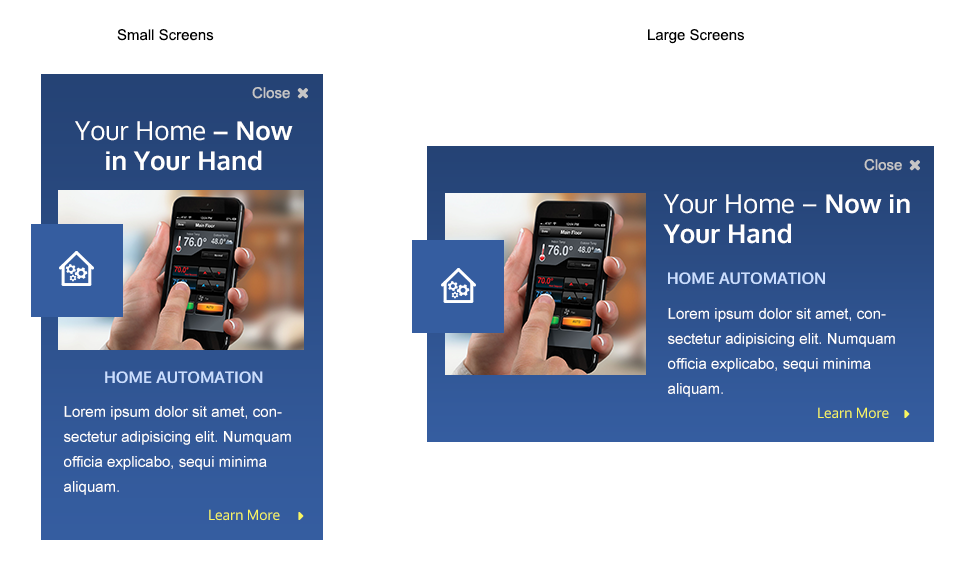
<style>
.page{position:relative;width:976px;height:582px;background:#ffffff}
.page>*{position:absolute;margin:0}
.t1{font:15px "ArialMT";color:#000000}
.t2{font:15px "ArialMT";color:#c6c6c6}
.t3{font:26px/30px "Oxygen-Bold";color:#ffffff}
.t4{font:26px/30px "Oxygen-Regular";color:#ffffff}
.t5{font:16px "Oxygen-Bold";color:#cadeff;text-transform:uppercase}
.t6{font:15px/25px "ArialMT";color:#ffffff}
.t7{font:14px "Oxygen-Regular";color:#f8f65f}
</style>
<div class="page">
<p class="t1" style="left:117px;top:29px;width:97px;height:12px">Small Screens</p>
<p class="t1" style="left:648px;top:29px;width:96px;height:15px">Large Screens</p>
<p class="t2" style="left:252px;top:87px;width:38px;height:12px">Close</p>
<p class="t3" style="left:75px;top:121px;width:218px;height:50px;text-align:center"><span class="t4">Your Home </span>– Now<br>in Your Hand</p>
<p class="t2" style="left:864px;top:159px;width:38px;height:12px">Close</p>
<p class="t3" style="left:663px;top:194px;width:247px;height:50px"><span class="t4">Your Home – </span>Now in <br>Your Hand</p>
<p class="t5" style="left:668px;top:272px;width:157px;height:13px">Home Automation</p>
<p class="t6" style="left:668px;top:308px;width:227px;height:89px">Lorem ipsum dolor sit amet, consectetur adipisicing elit. Numquam officia explicabo, sequi minima aliquam.</p>
<p class="t5" style="left:105px;top:371px;width:158px;height:13px">Home Automation</p>
<p class="t6" style="left:64px;top:406px;width:227px;height:89px">Lorem ipsum dolor sit amet, consectetur adipisicing elit. Numquam officia explicabo, sequi minima aliquam.</p>
<p class="t7" style="left:818px;top:407px;width:71px;height:12px">Learn More</p>
<p class="t7" style="left:209px;top:509px;width:71px;height:12px">Learn More</p>
</div>
